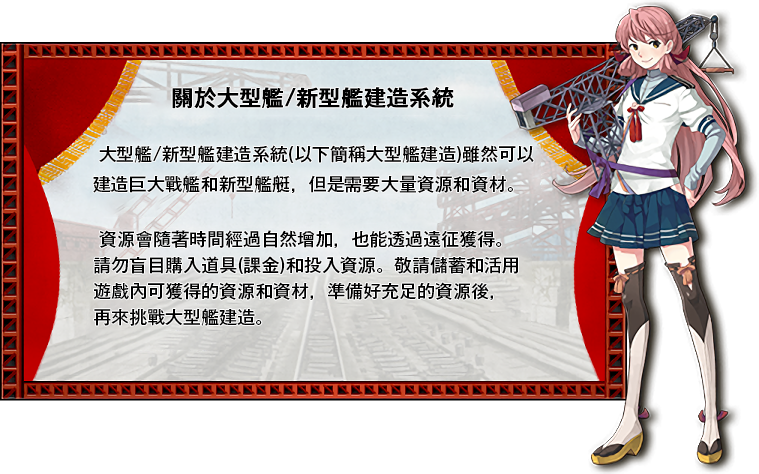
<style>
.page{position:relative;width:759px;height:474px;background:#ffffff}
.page>*{position:absolute;margin:0}
.t1{font:22px "GothicMB101Pr6N-Medium";color:#000000;font-weight:bold}
.t2{font:18px/30px "GothicMB101Pr6N-Medium";color:#000000}
.t3{font:18px/26px "GothicMB101Pr6N-Medium";color:#000000}
</style>
<div class="page">
<p class="t1" style="left:172px;top:87px;width:282px;height:22px">關於大型艦/新型艦建造系統</p>
<p class="t2" style="left:93px;top:145px;width:441px;height:48px">大型艦/新型艦建造系統(以下簡稱大型艦建造)雖然可以<br>建造巨大戰艦和新型艦艇，但是需要大量資源和資材。</p>
<p class="t3" style="left:93px;top:230px;width:425px;height:96px">資源會隨著時間經過自然增加，也能透過遠征獲得。<br>請勿盲目購入道具(課金)和投入資源。敬請儲蓄和活用<br>遊戲內可獲得的資源和資材，準備好充足的資源後，<br>再來挑戰大型艦建造。</p>
</div>
